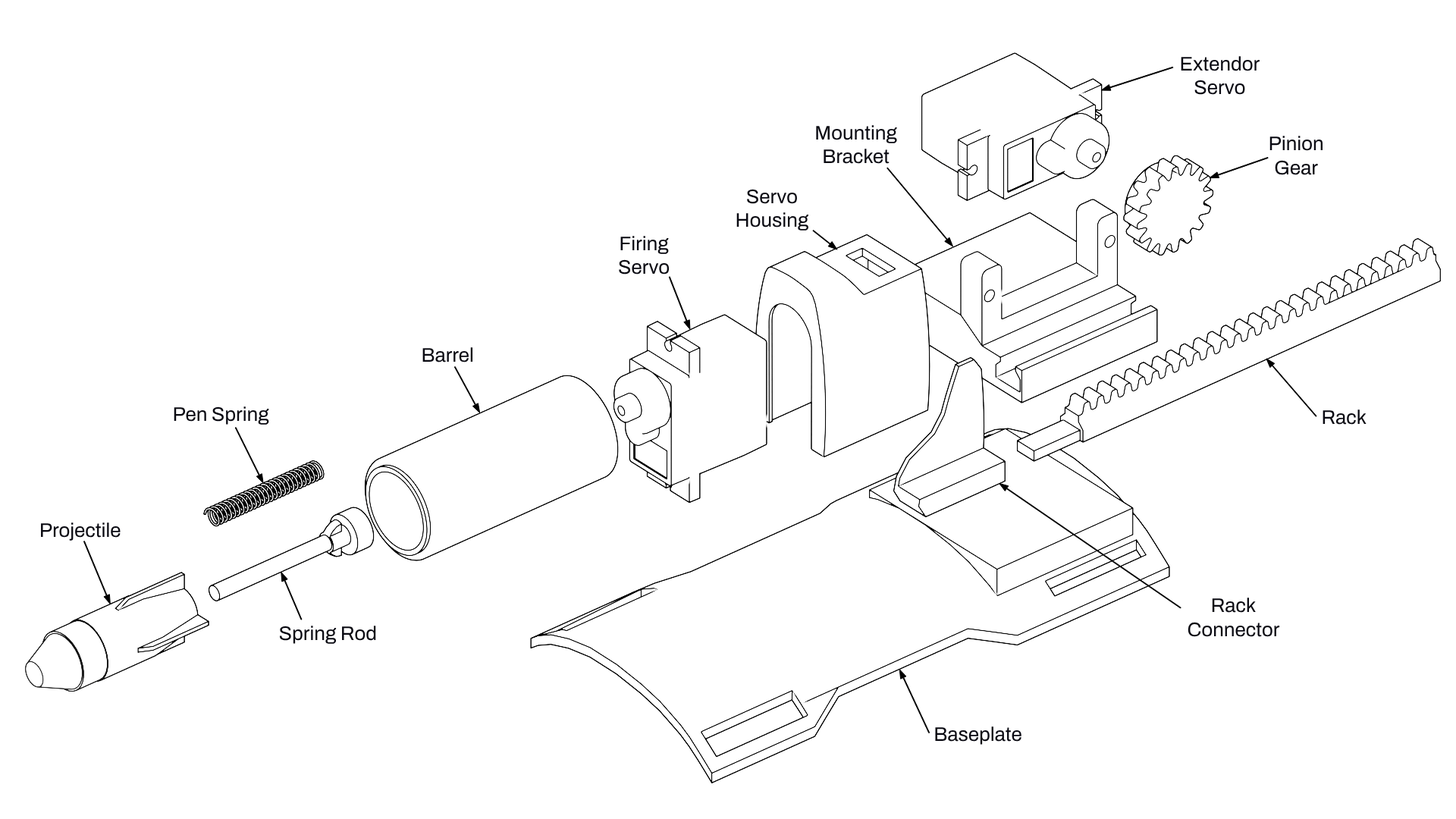
<style>
.page{position:relative;width:1456px;height:819px;background:#ffffff}
.page>*{position:absolute;margin:0}
.t1{font:19.7px "Archivo-Regular";color:#0a0a12}
</style>
<div class="page">
<p class="t1" style="left:1181px;top:56px;width:79px;height:39px;text-align:center">Extendor<br>Servo</p>
<p class="t1" style="left:816px;top:125px;width:81px;height:39px;text-align:center">Mounting<br>Bracket</p>
<p class="t1" style="left:1269px;top:136px;width:54px;height:39px;text-align:center">Pinion<br>Gear</p>
<p class="t1" style="left:736px;top:189px;width:73px;height:42px;text-align:center">Servo<br>Housing</p>
<p class="t1" style="left:619px;top:236px;width:51px;height:39px;text-align:center">Firing<br>Servo</p>
<p class="t1" style="left:422px;top:347px;width:51px;height:15px">Barrel</p>
<p class="t1" style="left:174px;top:406px;width:95px;height:19px">Pen Spring</p>
<p class="t1" style="left:1323px;top:409px;width:43px;height:16px">Rack</p>
<p class="t1" style="left:41px;top:522px;width:80px;height:19px">Projectile</p>
<p class="t1" style="left:1188px;top:598px;width:92px;height:39px;text-align:center">Rack<br>Connector</p>
<p class="t1" style="left:279px;top:626px;width:97px;height:18px">Spring Rod</p>
<p class="t1" style="left:935px;top:726px;width:86px;height:19px">Baseplate</p>
</div>
